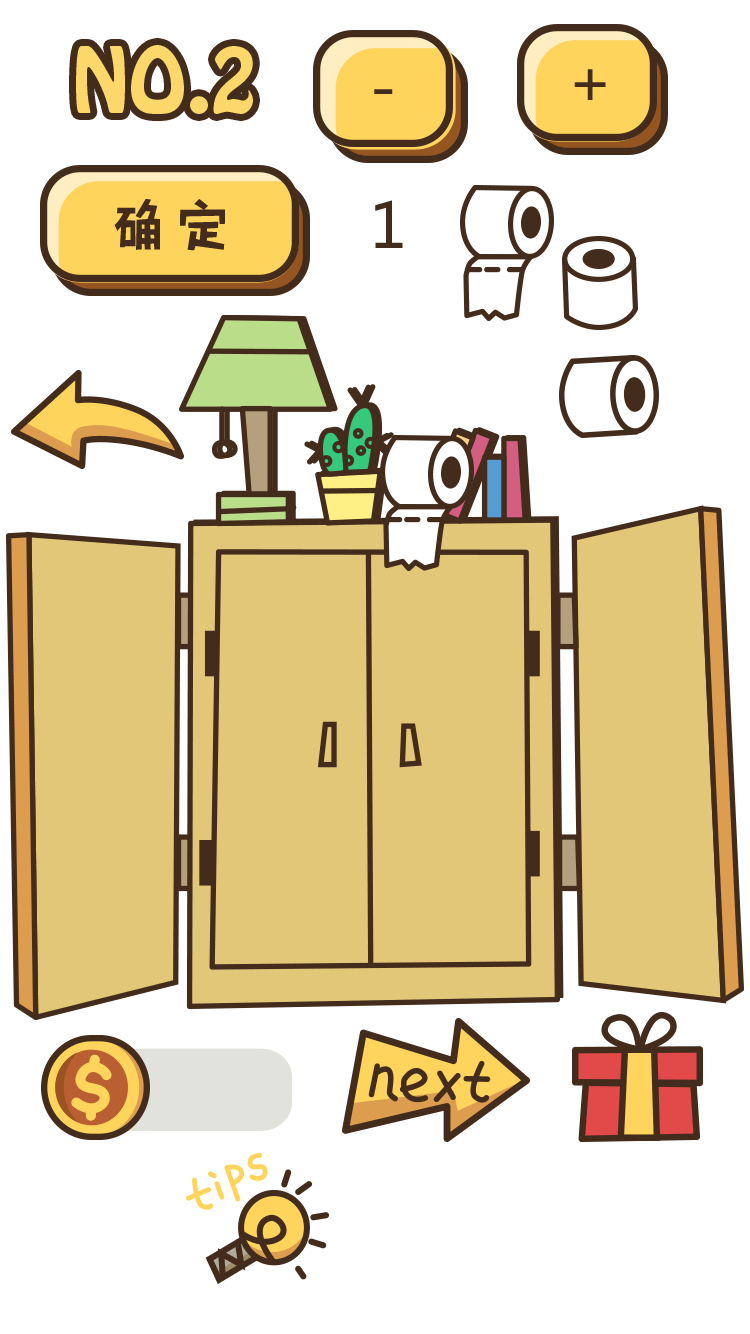
<style>
.page{position:relative;width:750px;height:1334px;background:#ffffff}
.page>*{position:absolute;margin:0}
.t1{font:80.6px "HoboStd";color:#fcd86b}
.t2{font:61.5px "MicrosoftYaHei";letter-spacing:0.08em;color:#442c1c}
.t3{font:59.7px "HYHeiLiZhiTiJ";letter-spacing:0.08em;color:#442c1c}
</style>
<div class="page">
<p class="t1" style="left:76px;top:45px;width:177px;height:69px">NO.2</p>
<p class="t2" style="left:574px;top:69px;width:32px;height:31px">+</p>
<p class="t2" style="left:374px;top:89px;width:19px;height:5px">-</p>
<p class="t3" style="left:114px;top:199px;width:111px;height:52px">确定</p>
<p class="t2" style="left:375px;top:200px;width:28px;height:48px">1</p>
</div>
